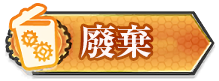
<style>
.page{position:relative;width:219px;height:81px;background:#ffffff}
.page>*{position:absolute;margin:0}
.t1{font:36px "RyuminPr6N-ExBold";color:#fff8f6}
</style>
<div class="page">
<p class="t1" style="left:81px;top:24px;width:70px;height:34px">廢棄</p>
</div>
